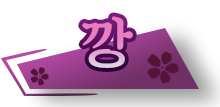
<style>
.page{position:relative;width:220px;height:107px;background:#ffffff}
.page>*{position:absolute;margin:0}
.t1{font:57.7px "SDKukdetopokki-aLt";letter-spacing:0.06em}
</style>
<div class="page">
<p class="t1" style="left:82px;top:16px;width:51px;height:52px">깡</p>
</div>
